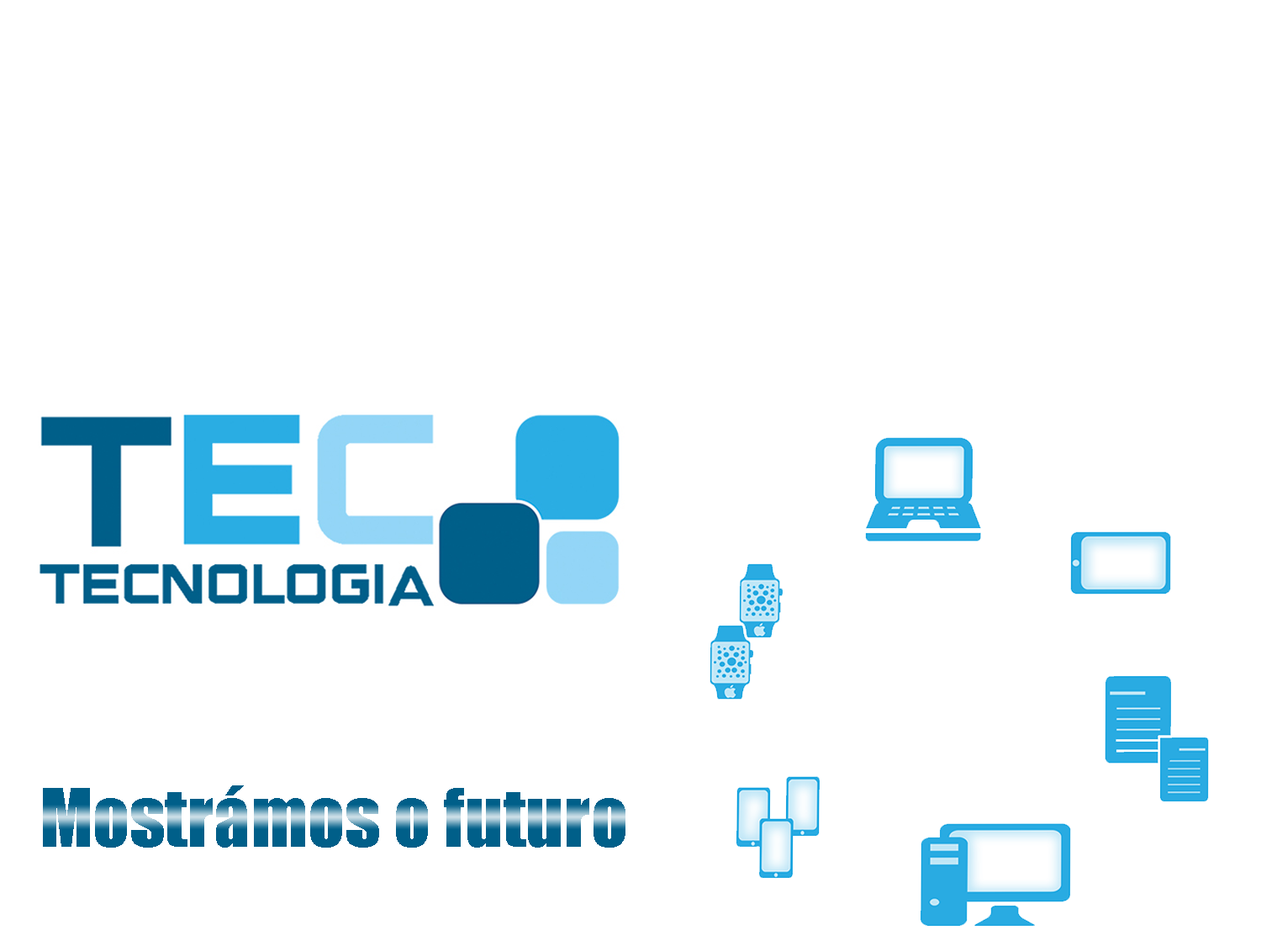
<style>
.page{position:relative;width:1261px;height:946px;background:#ffffff}
.page>*{position:absolute;margin:0}
.t1{font:73.6px "Impact"}
</style>
<div class="page">
<p class="t1" style="left:43px;top:785px;width:582px;height:62px">Mostrámos o futuro</p>
</div>
